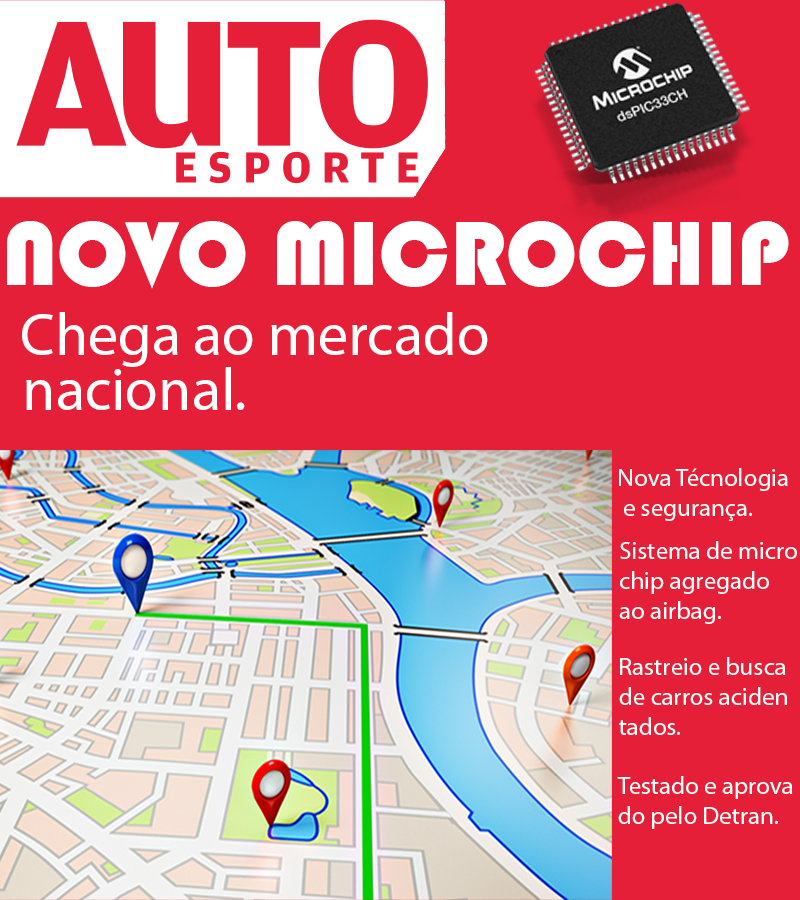
<style>
.page{position:relative;width:800px;height:900px;background:#e41f37}
.page>*{position:absolute;margin:0}
.t1{font:94px "Bauhaus93";color:#ffffff}
.t2{font:60px "MyriadPro-Regular";color:#ffffff}
.t3{font:25px "MyriadPro-Regular";color:#ffffff}
</style>
<div class="page">
<p class="t1" style="left:7px;top:221px;width:782px;height:68px">NOVO MICROCHIP</p>
<p class="t2" style="left:22px;top:312px;width:466px;height:55px">Chega ao mercado</p>
<p class="t2" style="left:26px;top:367px;width:219px;height:43px">nacional.</p>
<p class="t3" style="left:619px;top:468px;width:169px;height:53px">Nova Técnologia<br> e segurança.</p>
<p class="t3" style="left:619px;top:541px;width:178px;height:83px">Sistema de micro<br>chip agregado<br>ao airbag.</p>
<p class="t3" style="left:619px;top:657px;width:168px;height:78px">Rastreio e busca<br>de carros aciden<br>tados.</p>
<p class="t3" style="left:617px;top:776px;width:176px;height:53px">Testado e aprova<br>do pelo Detran.</p>
</div>
